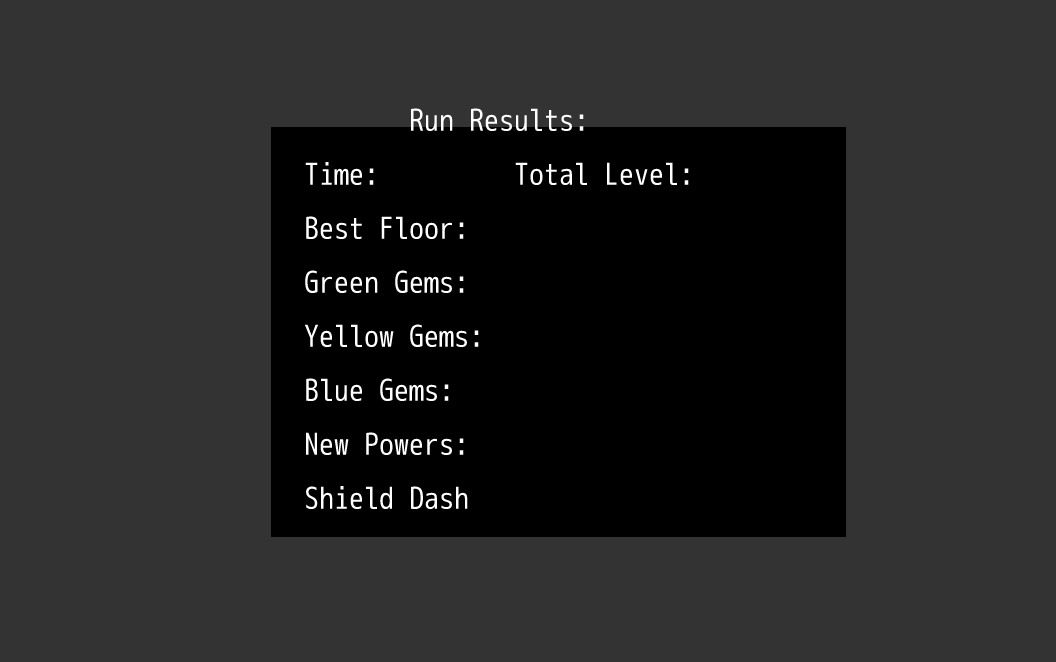
<style>
.page{position:relative;width:1056px;height:662px;background:#333333}
.page>*{position:absolute;margin:0}
.t1{font:30px/54px "mplus-1m-regular";color:#ffffff}
</style>
<div class="page">
<p class="t1" style="left:305px;top:108px;width:384px;height:401px">Run Results:<br>Time:         Total Level:<br>Best Floor:<br>Green Gems:<br>Yellow Gems:<br>Blue Gems:<br>New Powers:<br>Shield Dash</p>
</div>
